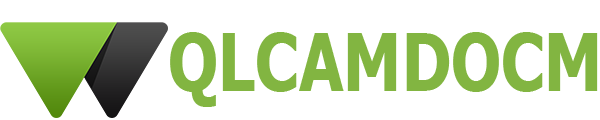
<style>
.page{position:relative;width:600px;height:120px;background:#ffffff}
.page>*{position:absolute;margin:0}
.t1{font:80px "Tahoma-Bold";color:#82b541;scale:0.81 1}
</style>
<div class="page">
<p class="t1" style="left:170px;top:32px;width:428px;height:75px">QLCAMDOCM</p>
</div>
